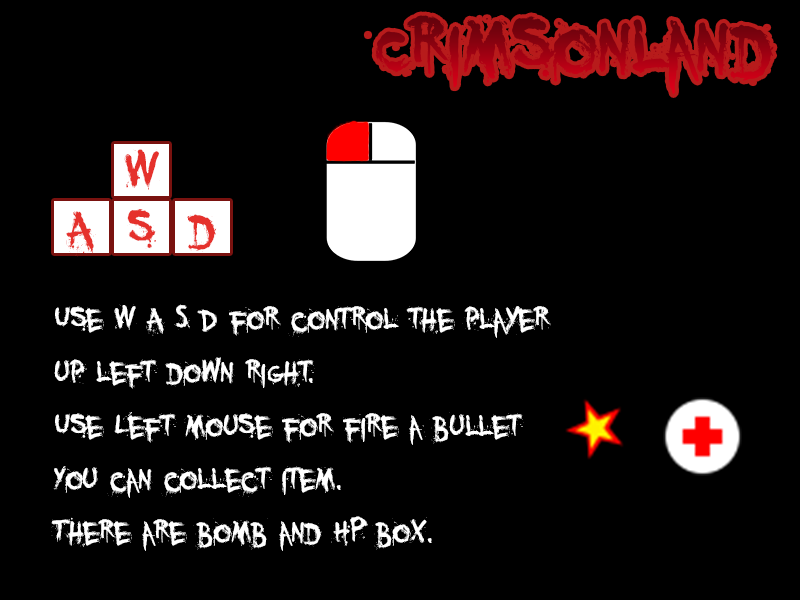
<style>
.page{position:relative;width:800px;height:600px;background:#000000}
.page>*{position:absolute;margin:0}
.t1{font:111.1px "YouMurdererBB"}
.t2{font:72px "YouMurdererBB";color:#e5312c}
.t3{font:44.4px "YouMurdererBB";color:#ffffff}
</style>
<div class="page">
<p class="t1" style="left:367px;top:15px;width:407px;height:79px">Crimsonland</p>
<p class="t2" style="left:124px;top:149px;width:36px;height:41px">W</p>
<p class="t2" style="left:127px;top:209px;width:29px;height:40px">s</p>
<p class="t2" style="left:66px;top:211px;width:30px;height:46px">A</p>
<p class="t2" style="left:187px;top:214px;width:30px;height:38px">d</p>
<p class="t3" style="left:51px;top:304px;width:500px;height:247px">Use W A S D for control the player<br>up left down right.<br>Use Left mouse for fire a bullet<br>You can collect item. <br>There are bomb and HP box.</p>
</div>
